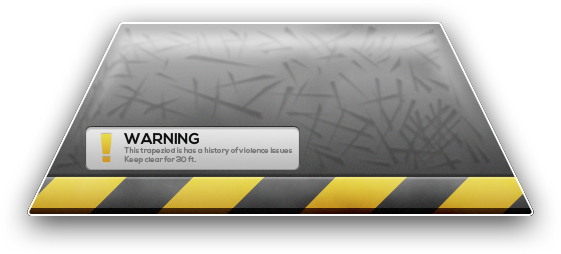
<style>
.page{position:relative;width:561px;height:254px}
.page>*{position:absolute;margin:0}
.t1{font:7.6px "NexaBold";color:#808080}
.t2{font:15.2px "NexaBold";color:#000000}
</style>
<div class="page">
<p class="t1" style="left:124px;top:132px;width:169px;height:32px"><span class="t2">WARNING<br></span>This trapeziod is has a history of violence issues<br>Keep clear for 30 ft.</p>
</div>
